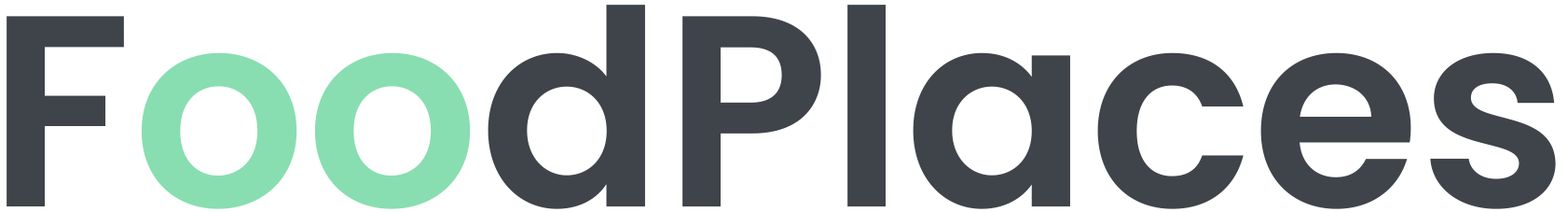
<style>
.page{position:relative;width:1568px;height:212px;background:#ffffff}
.page>*{position:absolute;margin:0}
.t1{font:271.9px "Poppins-SemiBold";color:#3e4449}
.t2{font:271.9px "Poppins-SemiBold";color:#88deb0}
</style>
<div class="page">
<p class="t1" style="left:7px;top:5px;width:1549px;height:204px">F<span class="t2">oo</span>dPlaces</p>
</div>
